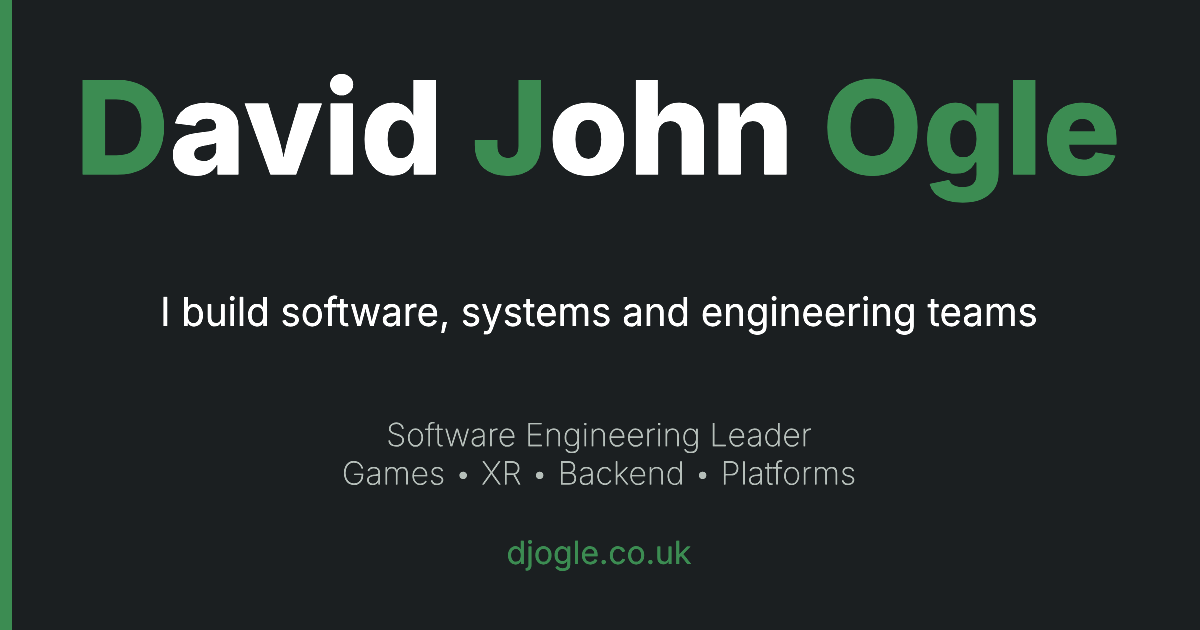
<style>
.page{position:relative;width:1200px;height:630px;background:#1b1f21}
.page>*{position:absolute;margin:0}
.t1{font:130px "Inter-ExtraBold";color:#ffffff}
.t2{font:130px "Inter-ExtraBold";color:#3c8c52}
.t3{font:40px "Inter-Regular";color:#ffffff;scale:0.96 1}
.t4{font:32px "Inter-ExtraLight";color:#b6bfba}
.t5{font:32px "Inter-Regular";color:#3c8c52}
</style>
<div class="page">
<p class="t1" style="left:82px;top:73px;width:1035px;height:130px"><span class="t2">D</span>avid <span class="t2">J</span>ohn <span class="t2">Ogle</span></p>
<p class="t3" style="left:163px;top:295px;width:873px;height:40px">I build software, systems and engineering teams</p>
<p class="t4" style="left:344px;top:421px;width:511px;height:65px;text-align:center">Software Engineering Leader<br>Games • XR • Backend • Platforms</p>
<p class="t5" style="left:508px;top:539px;width:184px;height:32px">djogle.co.uk</p>
</div>
